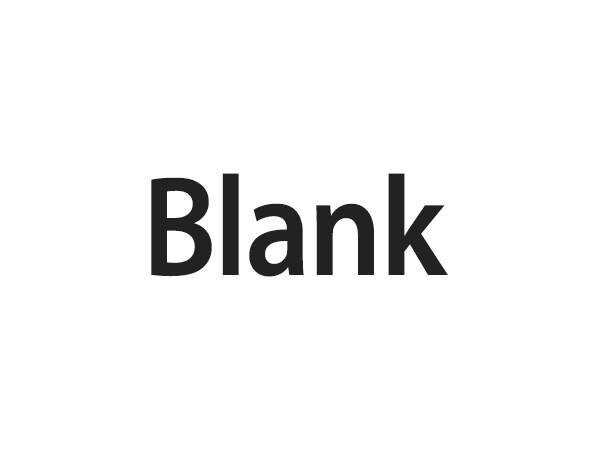
<style>
.page{position:relative;width:600px;height:450px;background:#ffffff}
.page>*{position:absolute;margin:0}
.t1{font:143px "MyriadPro-Semibold";letter-spacing:-0.02em;color:#222222;scale:0.91 1}
</style>
<div class="page">
<p class="t1" style="left:151px;top:173px;width:297px;height:104px">Blank</p>
</div>
